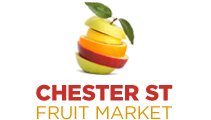
<style>
.page{position:relative;width:211px;height:120px;background:#ffffff}
.page>*{position:absolute;margin:0}
.t1{font:18.2px/18.5px "Gotham-Book";letter-spacing:-0.01em;color:#df9500;text-transform:uppercase}
.t2{font:22.2px/18.5px "Gotham-Black";letter-spacing:-0.01em;color:#c92f29;text-transform:uppercase}
</style>
<div class="page">
<p class="t1" style="left:36px;top:84px;width:137px;height:36px"><span class="t2">Chester St<br></span>FRuit market</p>
</div>
